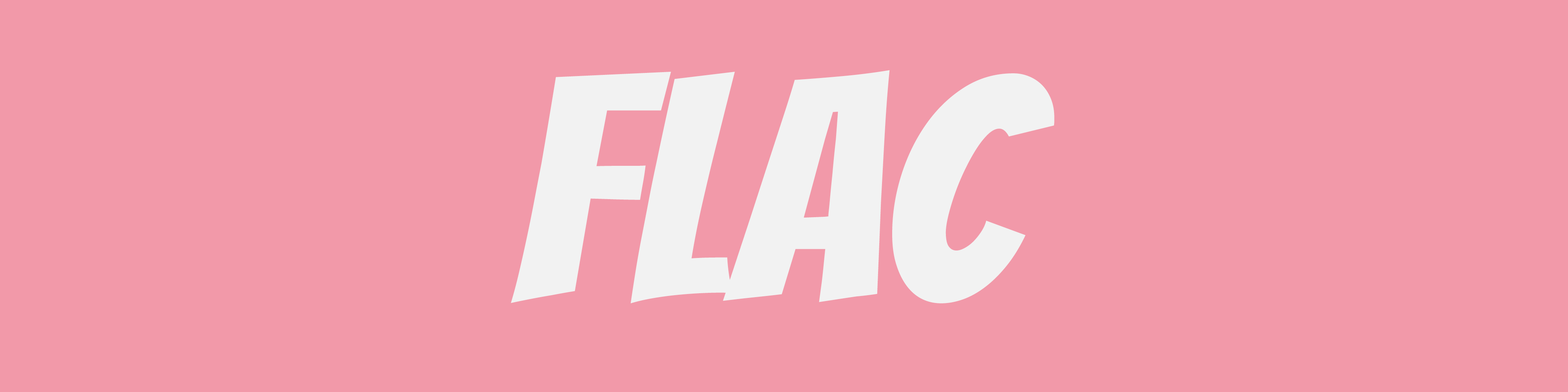
<style>
.page{position:relative;width:1568px;height:392px;background:#f299a9}
.page>*{position:absolute;margin:0}
.t1{font:313.6px "Bangers-Regular";color:#f2f2f2;scale:1.09 1}
</style>
<div class="page">
<p class="t1" style="left:511px;top:70px;width:543px;height:233px">Flac</p>
</div>
